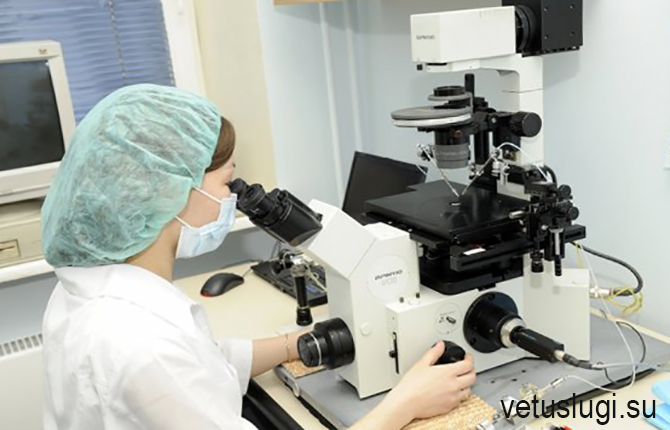
<style>
.page{position:relative;width:670px;height:430px}
.page>*{position:absolute;margin:0}
.t1{font:35.1px "ArialNarrow";letter-spacing:0.002em;color:#121314;scale:1.04 1}
</style>
<div class="page">
<p class="t1" style="left:500px;top:393px;width:156px;height:32px">vetuslugi.su</p>
</div>
